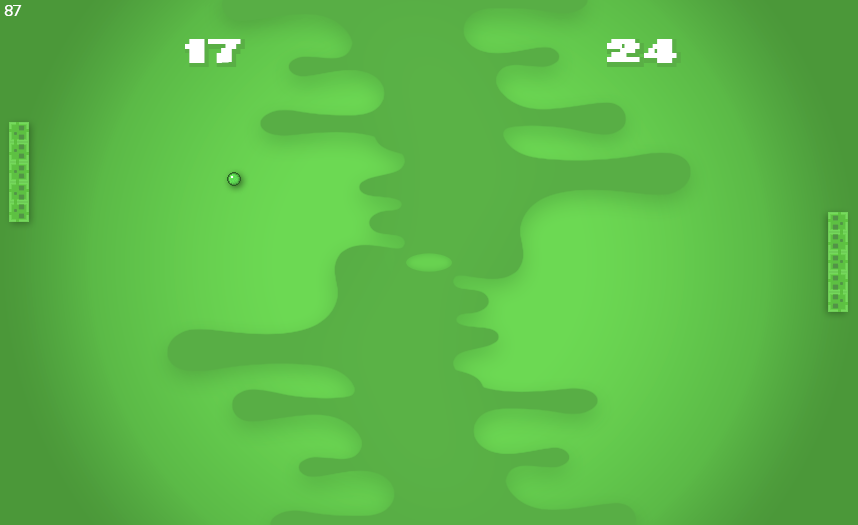
<style>
.page{position:relative;width:858px;height:525px}
.page>*{position:absolute;margin:0}
.t1{font:16px "BrandonGrotesque-Light";color:#ffffff;font-weight:bold}
.t2{font:70.7px "8-bit-Arcade-Out";color:#59af45;font-weight:bold}
.t3{font:70.7px "8-bit-Arcade-In";color:#ffffff;font-weight:bold}
</style>
<div class="page">
<p class="t1" style="left:4px;top:5px;width:18px;height:11px">87</p>
<p class="t2" style="left:185px;top:39px;width:60px;height:28px">17</p>
<p class="t3" style="left:185px;top:39px;width:56px;height:24px">17</p>
<p class="t2" style="left:607px;top:39px;width:74px;height:28px">24</p>
<p class="t3" style="left:607px;top:39px;width:70px;height:24px">24</p>
</div>
